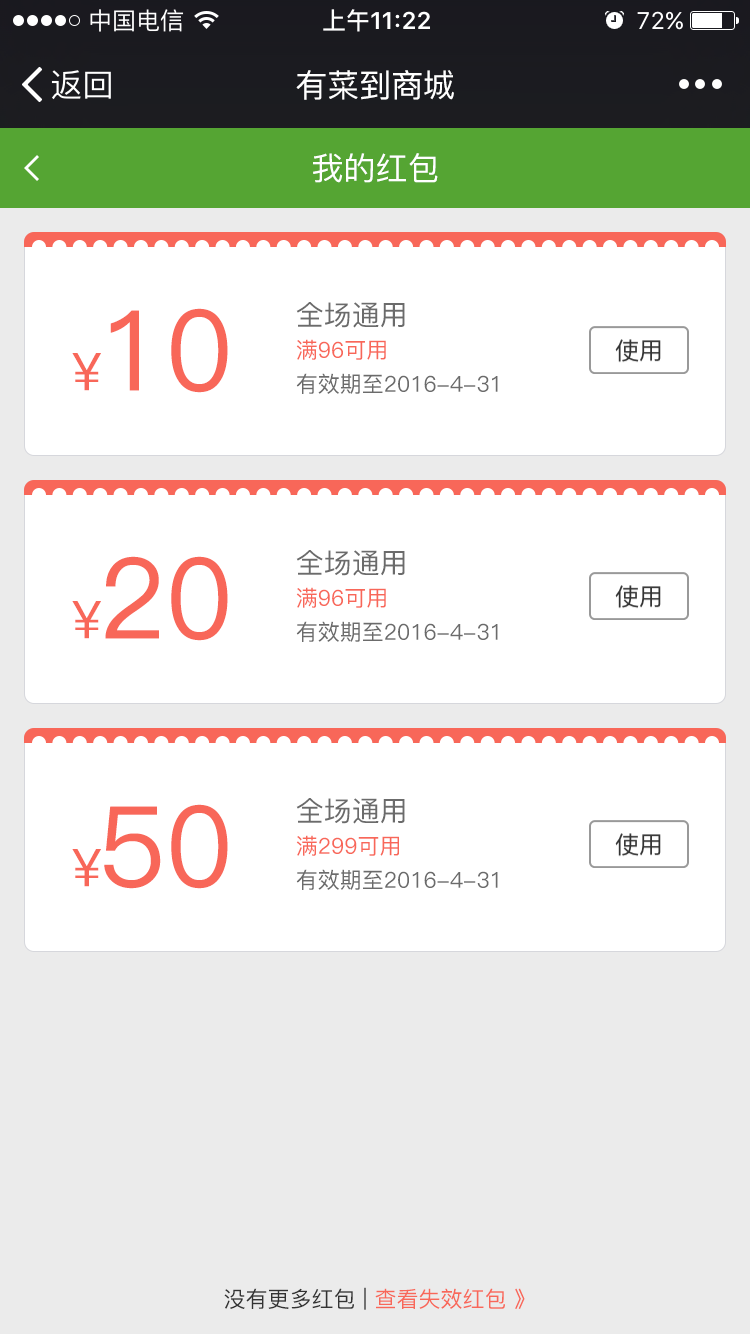
<style>
.page{position:relative;width:750px;height:1334px;background:#ffffff}
.page>*{position:absolute;margin:0}
.t1{font:32px "PingFang-SC-Medium";color:#ffffff}
.t2{font:28px "PingFang-SC-Medium";color:#6b6b6b}
.t3{font:112px "PingFang-SC-Medium";color:#f86759}
.t4{font:22px "PingFang-SC-Medium";color:#f86759}
.t5{font:52px "PingFang-SC-Medium";color:#f86759}
.t6{font:22px "PingFang-SC-Medium";color:#6b6b6b}
.t7{font:22px "PingFang-SC-Medium";color:#333333}
</style>
<div class="page">
<p class="t1" style="left:296px;top:70px;width:158px;height:30px">有菜到商城</p>
<p class="t1" style="left:313px;top:153px;width:125px;height:30px">我的红包</p>
<p class="t2" style="left:296px;top:302px;width:109px;height:26px">全场通用</p>
<p class="t3" style="left:110px;top:308px;width:118px;height:85px">10</p>
<p class="t4" style="left:296px;top:339px;width:90px;height:21px">满96可用</p>
<p class="t5" style="left:72px;top:353px;width:29px;height:38px">￥</p>
<p class="t6" style="left:296px;top:373px;width:202px;height:21px">有效期至2016-4-31</p>
<p class="t3" style="left:105px;top:556px;width:123px;height:85px">20</p>
<p class="t2" style="left:296px;top:550px;width:109px;height:26px">全场通用</p>
<p class="t4" style="left:296px;top:587px;width:90px;height:21px">满96可用</p>
<p class="t5" style="left:72px;top:601px;width:29px;height:38px">￥</p>
<p class="t6" style="left:296px;top:621px;width:202px;height:21px">有效期至2016-4-31</p>
<p class="t2" style="left:296px;top:798px;width:109px;height:26px">全场通用</p>
<p class="t3" style="left:104px;top:804px;width:124px;height:85px">50</p>
<p class="t4" style="left:296px;top:835px;width:103px;height:21px">满299可用</p>
<p class="t5" style="left:72px;top:849px;width:29px;height:38px">￥</p>
<p class="t6" style="left:296px;top:869px;width:202px;height:21px">有效期至2016-4-31</p>
<p class="t7" style="left:224px;top:1287px;width:142px;height:23px">没有更多红包 |</p>
<p class="t4" style="left:375px;top:1288px;width:150px;height:21px">查看失效红包 》</p>
</div>
